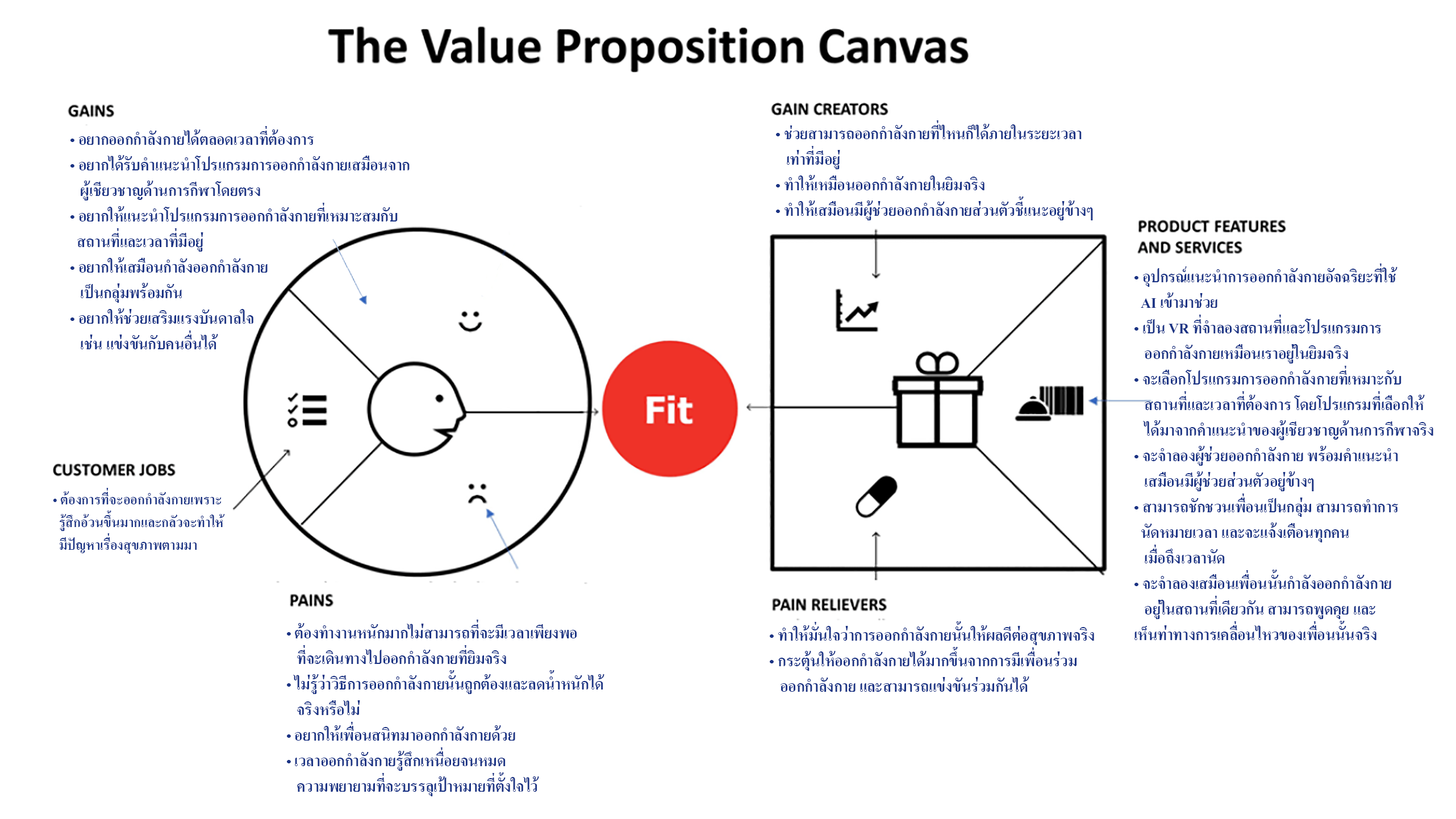
<style>
.page{position:relative;width:1456px;height:819px;background:#ffffff}
.page>*{position:absolute;margin:0}
.t1{font:21.3px "AngsanaUPC-Bold";color:#1b3485}
.t2{font:18.9px "AngsanaUPC-Bold";color:#1b3485}
</style>
<div class="page">
<p class="t1" style="left:776px;top:120px;width:317px;height:100px">• ช่วยสามารถออกกำลังกายที่ไหนก็ได้ภายในระยะเวลา<br>   เท่าที่มีอยู่<br>• ทำให้เหมือนออกกำลังกายในยิมจริง<br>• ทำให้เสมือนมีผู้ช่วยออกกำลังกายส่วนตัวชี้แนะอยู่ข้างๆ</p>
<p class="t1" style="left:70px;top:126px;width:340px;height:223px">• อยากออกกำลังกายได้ตลอดเวลาที่ต้องการ<br>• อยากได้รับคำแนะนำโปรแกรมการออกกำลังกายเสมือนจาก<br>   ผู้เชียวชาญด้านการกีฬาโดยตรง<br>• อยากให้แนะนำโปรแกรมการออกกำลังกายที่เหมาะสมกับ<br>  สถานที่และเวลาที่มีอยู่<br>• อยากให้เสมือนกำลังออกกำลังกาย<br>   เป็นกลุ่มพร้อมกัน<br>• อยากให้ช่วยเสริมแรงบันดาลใจ<br>   เช่น แข่งขันกับคนอื่นได้</p>
<p class="t1" style="left:1134px;top:264px;width:299px;height:376px">• อุปกรณ์แนะนำการออกกำลังกายอัจฉริยะที่ใช้ <br>  AI เข้ามาช่วย<br>• เป็น VR ที่จำลองสถานที่และโปรแกรมการ<br>   ออกกำลังกายเหมือนเราอยู่ในยิมจริง<br>• จะเลือกโปรแกรมการออกกำลังกายที่เหมาะกับ<br>   สถานที่และเวลาที่ต้องการ โดยโปรแกรมที่เลือกให้<br>   ได้มาจากคำแนะนำของผู้เชียวชาญด้านการกีฬาจริง<br>• จะจำลองผู้ช่วยออกกำลังกาย พร้อมคำแนะนำ<br>   เสมือนมีผู้ช่วยส่วนตัวอยู่ข้างๆ<br>• สามารถชักชวนเพื่อนเป็นกลุ่ม สามารถทำการ<br>  นัดหมายเวลา และจะแจ้งเตือนทุกคน<br>   เมื่อถึงเวลานัด<br>• จะจำลองเสมือนเพื่อนนั้นกำลังออกกำลังกาย<br>   อยู่ในสถานที่เดียวกัน สามารถพูดคุย และ<br>เห็นท่าทางการเคลื่อนไหวของเพื่อนนั้นจริง</p>
<p class="t2" style="left:53px;top:488px;width:172px;height:66px">• ต้องการที่จะออกกำลังกายเพราะ<br>  รู้สึกอ้วนขึ้นมากและกลัวจะทำให้<br>  มีปัญหาเรื่องสุขภาพตามมา</p>
<p class="t1" style="left:287px;top:620px;width:317px;height:176px">• ต้องทำงานหนักมากไม่สามารถที่จะมีเวลาเพียงพอ<br>   ที่จะเดินทางไปออกกำลังกายที่ยิมจริง<br>• ไม่รู้ว่าวิธีการออกกำลังกายนั้นถูกต้องและลดน้ำหนักได้<br>   จริงหรือไม่<br>• อยากให้เพื่อนสนิทมาออกกำลังกายด้วย<br>• เวลาออกกำลังกายรู้สึกเหนื่อยจนหมด<br>   ความพยายามที่จะบรรลุเป้าหมายที่ตั้งใจไว้</p>
<p class="t1" style="left:770px;top:621px;width:324px;height:71px">• ทำให้มั่นใจว่าการออกกำลังกายนั้นให้ผลดีต่อสุขภาพจริง<br>• กระตุ้นให้ออกกำลังกายได้มากขึ้นจากการมีเพื่อนร่วม<br>   ออกกำลังกาย และสามารถแข่งขันร่วมกันได้</p>
</div>
